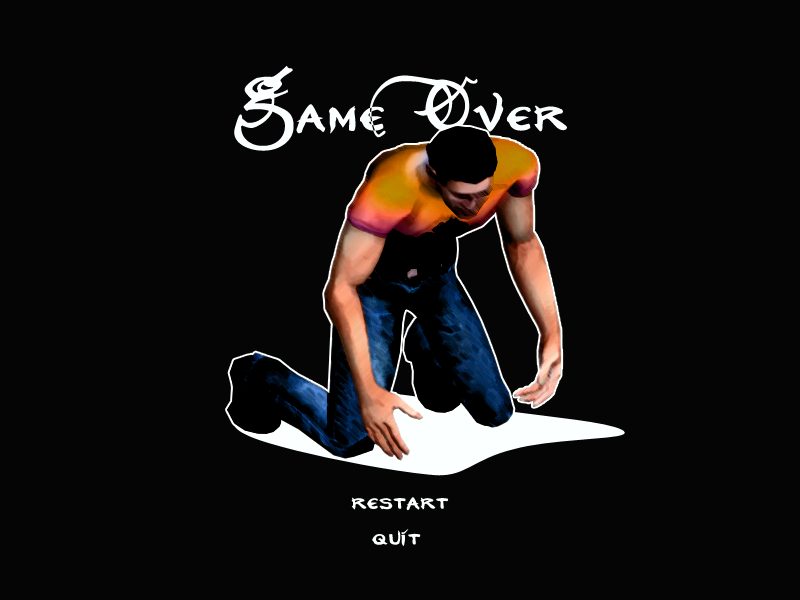
<style>
.page{position:relative;width:800px;height:600px;background:#050505}
.page>*{position:absolute;margin:0}
.t1{font:75.7px "NeverwinterNormal";color:#fcffff}
.t2{font:33.3px "NeverwinterNormal";color:#fcffff}
</style>
<div class="page">
<p class="t1" style="left:234px;top:66px;width:333px;height:85px">Game Over</p>
<p class="t2" style="left:351px;top:497px;width:98px;height:14px">restart</p>
<p class="t2" style="left:372px;top:529px;width:49px;height:17px">quit</p>
</div>
